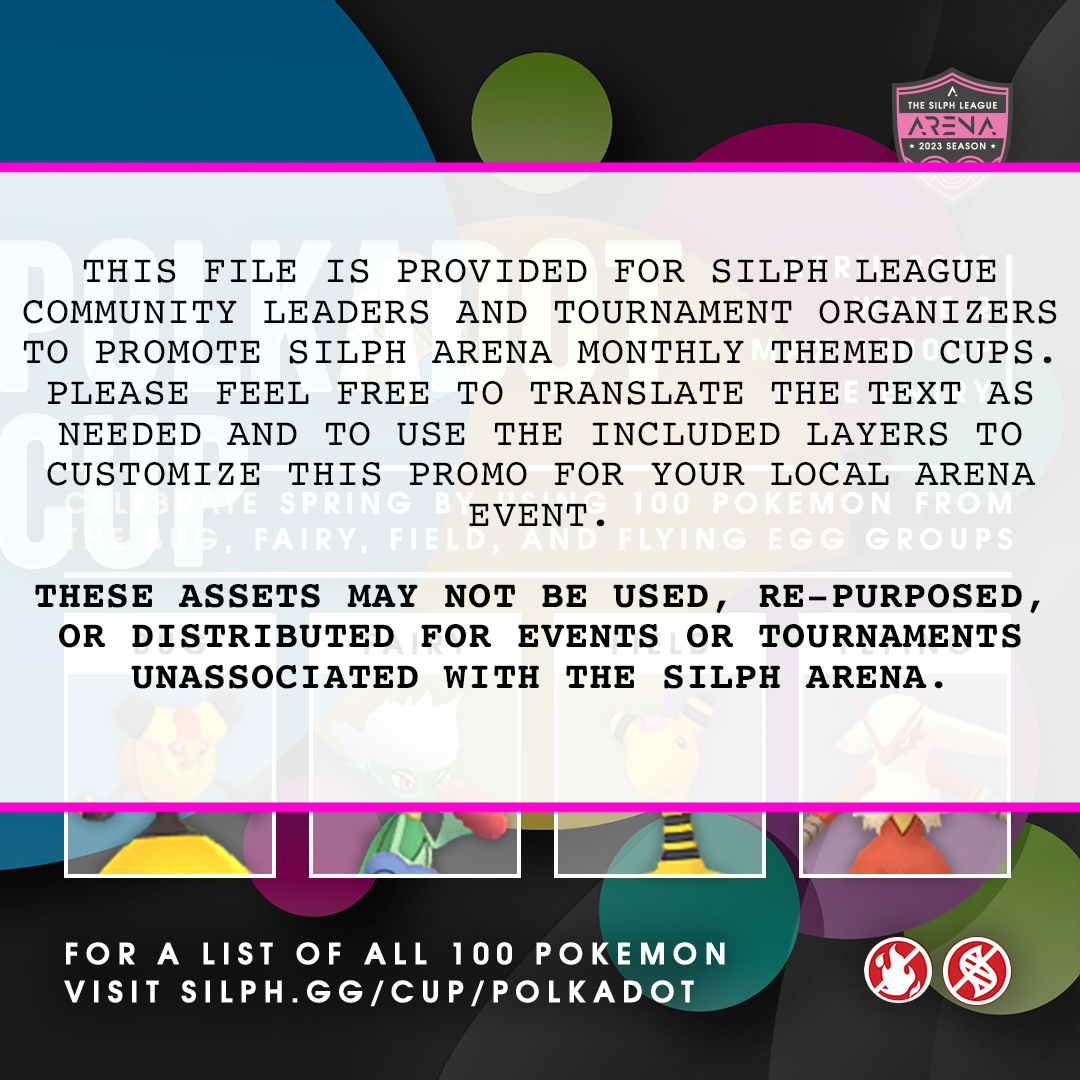
<style>
.page{position:relative;width:1080px;height:1080px}
.page>*{position:absolute;margin:0}
.t1{font:38.6px/40.5px "Courier";letter-spacing:0.025em;color:#010101;text-transform:uppercase}
.t2{font:38.6px/40.5px "Courier-Bold";letter-spacing:0.025em;color:#010101;text-transform:uppercase}
.t3{font:29px/37.5px "TeXGyreAdventor-Bold";letter-spacing:0.22em;color:#ffffff;text-transform:uppercase;font-weight:bold}
</style>
<div class="page">
<p class="t1" style="left:23px;top:259px;width:1034px;height:430px;text-align:center">THIS FILE IS provided for Silph League community leaders and tournament organizers to promote Silph Arena monthly themed cups. Please feel free to translate the text as needed and to use the included layers to customize this promo for your local Arena event.<br><br><span class="t2">These assets may not be used, re-purposed, or distributed for events or tournaments unassociated with the Silph Arena.</span></p>
<p class="t3" style="left:64px;top:942px;width:661px;height:65px">for a list of all 100 pokemon visit Silph.gg/cup/polkadot</p>
</div>
